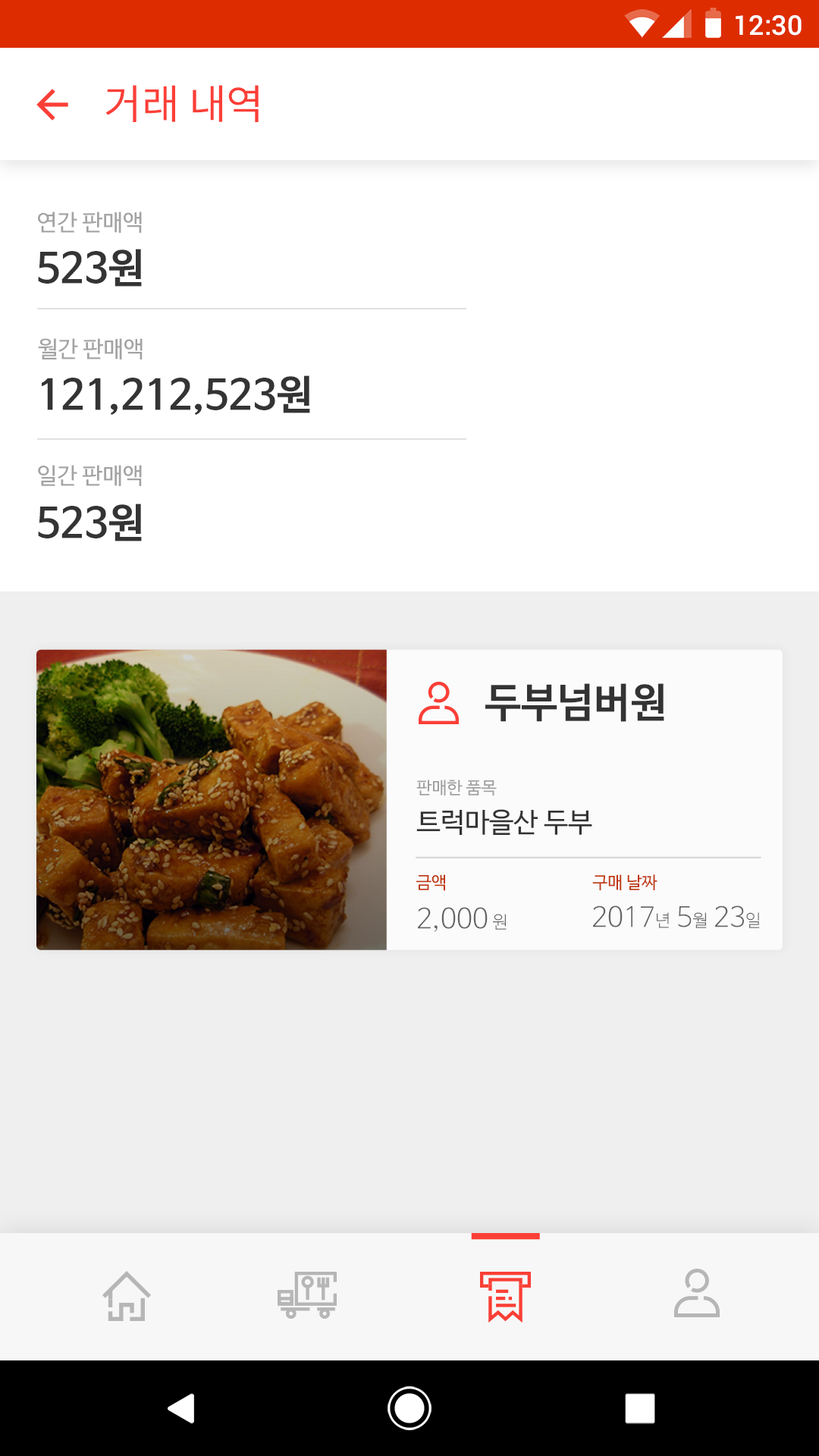
<style>
.page{position:relative;width:819px;height:1456px;background:#ffffff}
.page>*{position:absolute;margin:0}
.t1{font:27.3px "Roboto-Medium";color:#ffffff}
.t2{font:40.9px "NotoSansCJKkr-Regular";color:#fa3f37}
.t3{font:22.7px "NanumBarunGothic";color:#a3a3a3}
.t4{font:40.9px "NanumBarunGothicBold";color:#343434}
.t5{font:40.9px "NanumBarunGothicBold";color:#333333}
.t6{font:17.1px "NanumBarunGothic";color:#a0a0a0}
.t7{font:27.3px "NanumBarunGothic";color:#333333}
.t8{font:17.1px "NanumBarunGothic";color:#bf360c}
.t9{font:27.3px "NanumBarunGothicLight";color:#656565}
.t10{font:17.1px "NanumBarunGothicLight";color:#656565}
</style>
<div class="page">
<p class="t1" style="left:736px;top:15px;width:66px;height:21px">12:30</p>
<p class="t2" style="left:105px;top:85px;width:154px;height:37px">거래 내역</p>
<p class="t3" style="left:38px;top:212px;width:104px;height:21px">연간 판매액</p>
<p class="t4" style="left:38px;top:249px;width:104px;height:38px">523원</p>
<p class="t3" style="left:38px;top:338px;width:105px;height:21px">월간 판매액</p>
<p class="t4" style="left:42px;top:375px;width:268px;height:40px">121,212,523원</p>
<p class="t3" style="left:38px;top:465px;width:104px;height:21px">일간 판매액</p>
<p class="t4" style="left:38px;top:504px;width:104px;height:37px">523원</p>
<p class="t5" style="left:485px;top:683px;width:179px;height:39px">두부넘버원</p>
<p class="t6" style="left:416px;top:780px;width:81px;height:16px">판매한 품목</p>
<p class="t7" style="left:416px;top:809px;width:176px;height:26px">트럭마을산 두부</p>
<p class="t8" style="left:416px;top:874px;width:29px;height:17px">금액</p>
<p class="t8" style="left:592px;top:874px;width:65px;height:16px">구매 날짜</p>
<p class="t9" style="left:593px;top:905px;width:167px;height:23px">2017<span class="t10">년</span> 5<span class="t10">월</span> 23<span class="t10">일</span></p>
<p class="t9" style="left:418px;top:907px;width:89px;height:25px">2,000<span class="t10"> 원</span></p>
</div>
